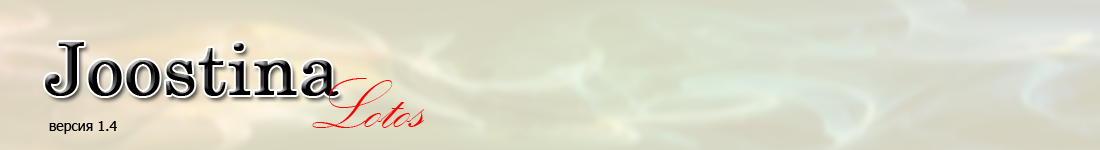
<style>
.page{position:relative;width:1100px;height:150px}
.page>*{position:absolute;margin:0}
.t1{font:72px "Century";color:#000000;font-weight:bold}
.t2{font:72px "KunstlerScript";color:#ff0000}
.t3{font:14px "Tahoma";color:#010101}
</style>
<div class="page">
<p class="t1" style="left:45px;top:42px;width:294px;height:54px">Joostina</p>
<p class="t2" style="left:312px;top:78px;width:113px;height:50px">Lotos</p>
<p class="t3" style="left:49px;top:121px;width:68px;height:13px">версия 1.4</p>
</div>
